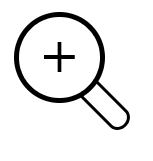
<style>
.page{position:relative;width:153px;height:161px;background:#ffffff}
.page>*{position:absolute;margin:0}
.t1{font:66.7px "Constantia";color:#000000}
</style>
<div class="page">
<p class="t1" style="left:44px;top:42px;width:31px;height:30px">+</p>
</div>
